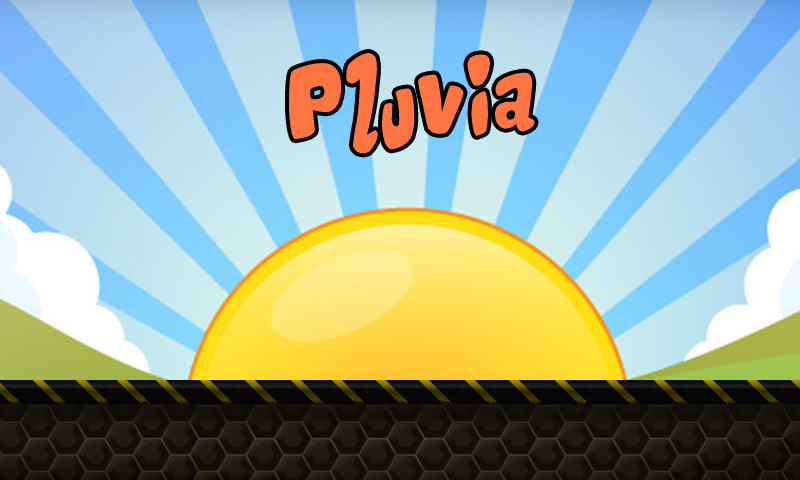
<style>
.page{position:relative;width:800px;height:480px}
.page>*{position:absolute;margin:0}
.t1{font:53.9px "MagicSound";letter-spacing:0.01em;color:#fc7543;scale:0.96 1}
</style>
<div class="page">
<p class="t1" style="left:289px;top:53px;width:246px;height:101px">Pluvia</p>
</div>
